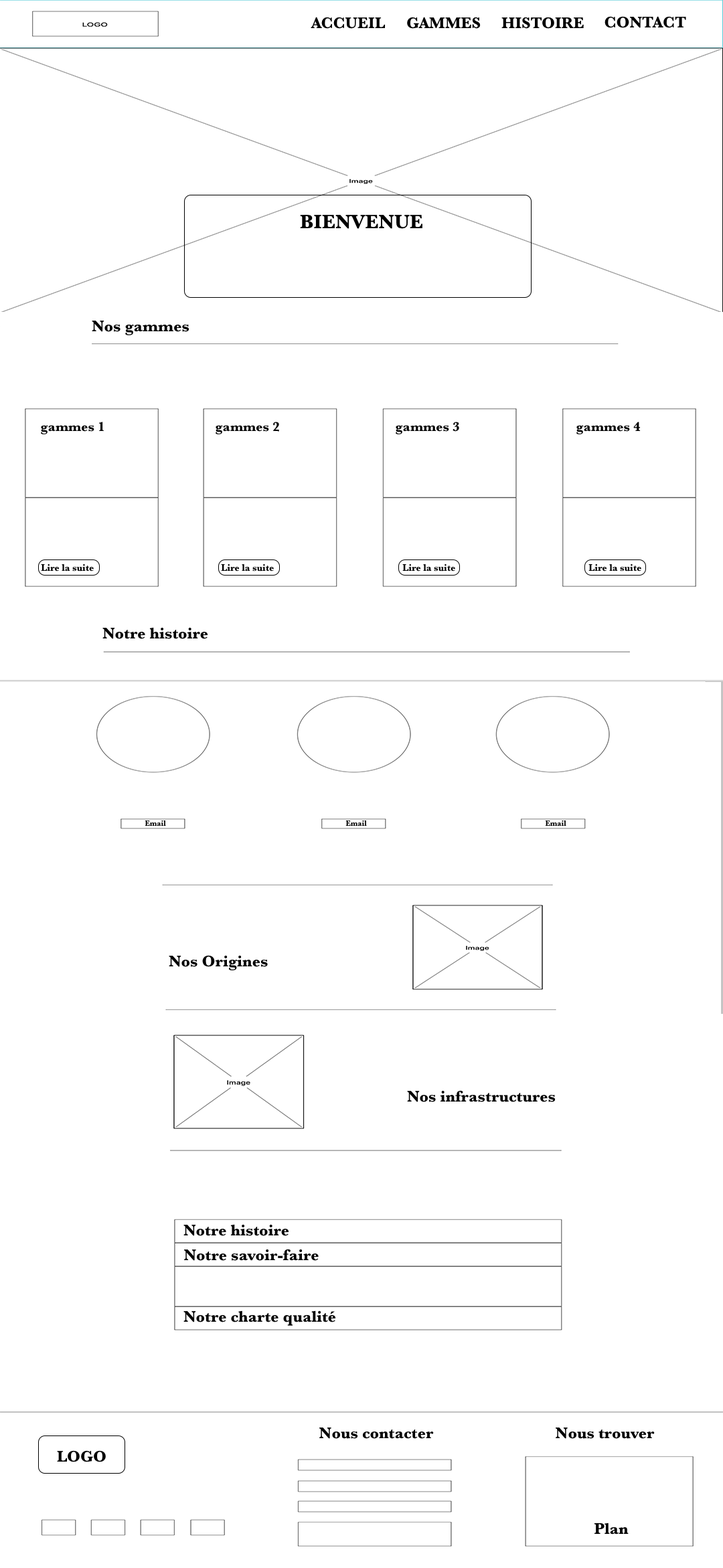
<style>
.page{position:relative;width:723px;height:1568px;background:#ffffff}
.page>*{position:absolute;margin:0}
.t1{font:16.1px "Baskerville-Bold";color:#000000}
.t2{font:20.1px "Baskerville-Bold";color:#000000}
.t3{font:13.4px "Baskerville-Bold";color:#000000}
.t4{font:9.4px "Baskerville-Bold";color:#000000}
.t5{font:7.4px "Baskerville-Bold";color:#000000}
</style>
<div class="page">
<p class="t1" style="left:311px;top:17px;width:74px;height:12px">ACCUEIL</p>
<p class="t1" style="left:407px;top:17px;width:74px;height:12px">GAMMES</p>
<p class="t1" style="left:501px;top:17px;width:83px;height:12px">HISTOIRE</p>
<p class="t1" style="left:604px;top:16px;width:82px;height:12px">CONTACT</p>
<p class="t2" style="left:300px;top:215px;width:122px;height:14px">BIENVENUE</p>
<p class="t1" style="left:92px;top:321px;width:97px;height:14px">Nos gammes</p>
<p class="t3" style="left:41px;top:422px;width:63px;height:12px">gammes 1</p>
<p class="t3" style="left:215px;top:422px;width:64px;height:12px">gammes 2</p>
<p class="t3" style="left:396px;top:422px;width:63px;height:12px">gammes 3</p>
<p class="t3" style="left:576px;top:422px;width:64px;height:12px">gammes 4</p>
<p class="t4" style="left:41px;top:563px;width:53px;height:9px">Lire la suite</p>
<p class="t4" style="left:221px;top:563px;width:53px;height:9px">Lire la suite</p>
<p class="t4" style="left:402px;top:563px;width:53px;height:9px">Lire la suite</p>
<p class="t4" style="left:588px;top:563px;width:53px;height:9px">Lire la suite</p>
<p class="t1" style="left:102px;top:627px;width:106px;height:12px">Notre histoire</p>
<p class="t5" style="left:145px;top:820px;width:21px;height:6px">Email</p>
<p class="t5" style="left:345px;top:820px;width:22px;height:6px">Email</p>
<p class="t5" style="left:545px;top:820px;width:21px;height:6px">Email</p>
<p class="t1" style="left:169px;top:955px;width:99px;height:15px">Nos Origines</p>
<p class="t1" style="left:407px;top:1090px;width:148px;height:12px">Nos infrastructures</p>
<p class="t1" style="left:183px;top:1224px;width:106px;height:12px">Notre histoire</p>
<p class="t1" style="left:184px;top:1249px;width:135px;height:12px">Notre savoir-faire</p>
<p class="t1" style="left:183px;top:1310px;width:153px;height:16px">Notre charte qualité</p>
<p class="t1" style="left:319px;top:1427px;width:115px;height:12px">Nous contacter</p>
<p class="t1" style="left:555px;top:1427px;width:100px;height:12px">Nous trouver</p>
<p class="t1" style="left:57px;top:1450px;width:49px;height:12px">LOGO</p>
<p class="t1" style="left:594px;top:1522px;width:34px;height:13px">Plan</p>
</div>
